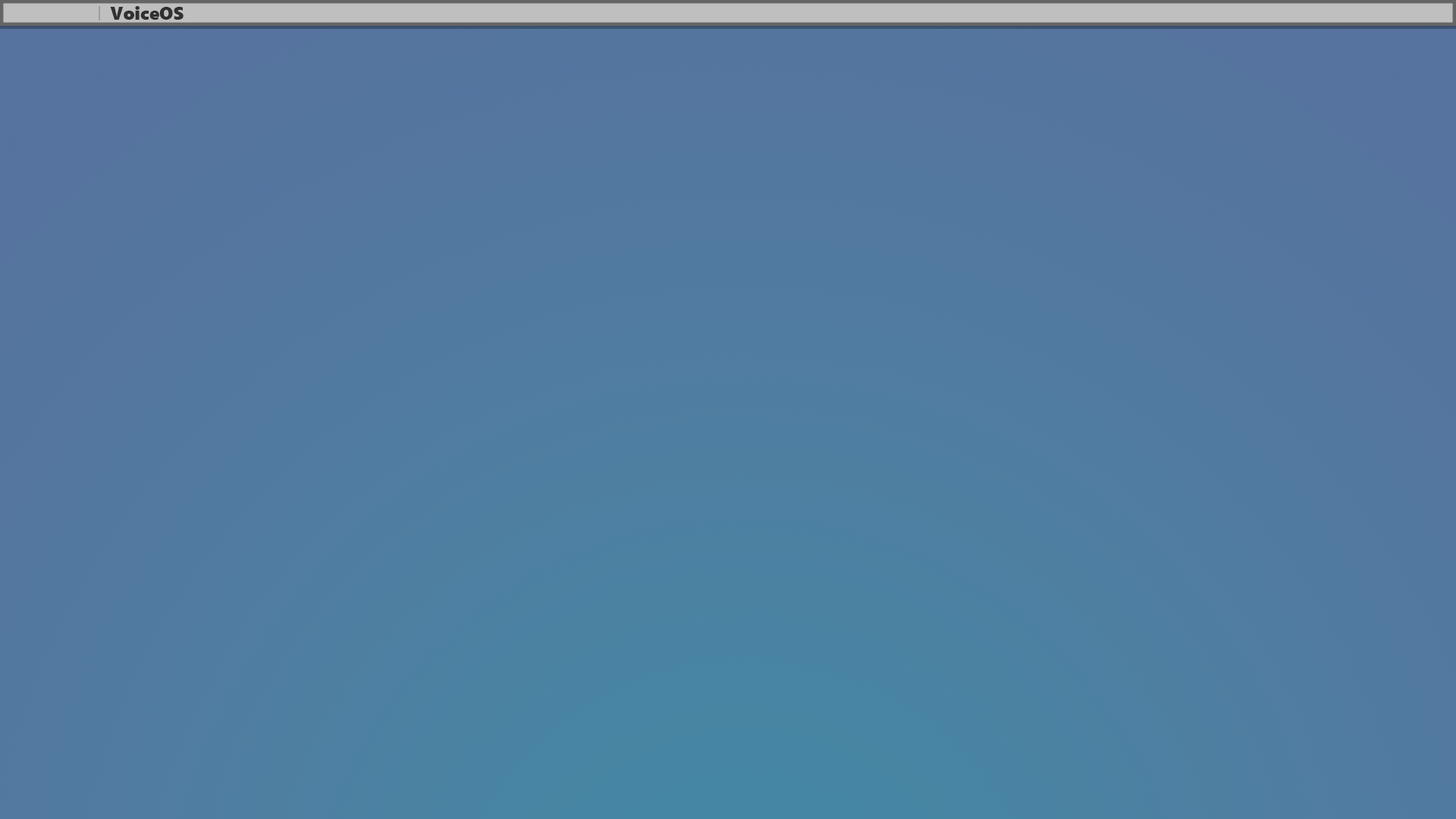
<style>
.page{position:relative;width:1456px;height:819px}
.page>*{position:absolute;margin:0}
.t1{font:18.2px "SegoeUIBlack";color:#303030}
</style>
<div class="page">
<p class="t1" style="left:110px;top:6px;width:74px;height:14px">VoiceOS</p>
</div>
